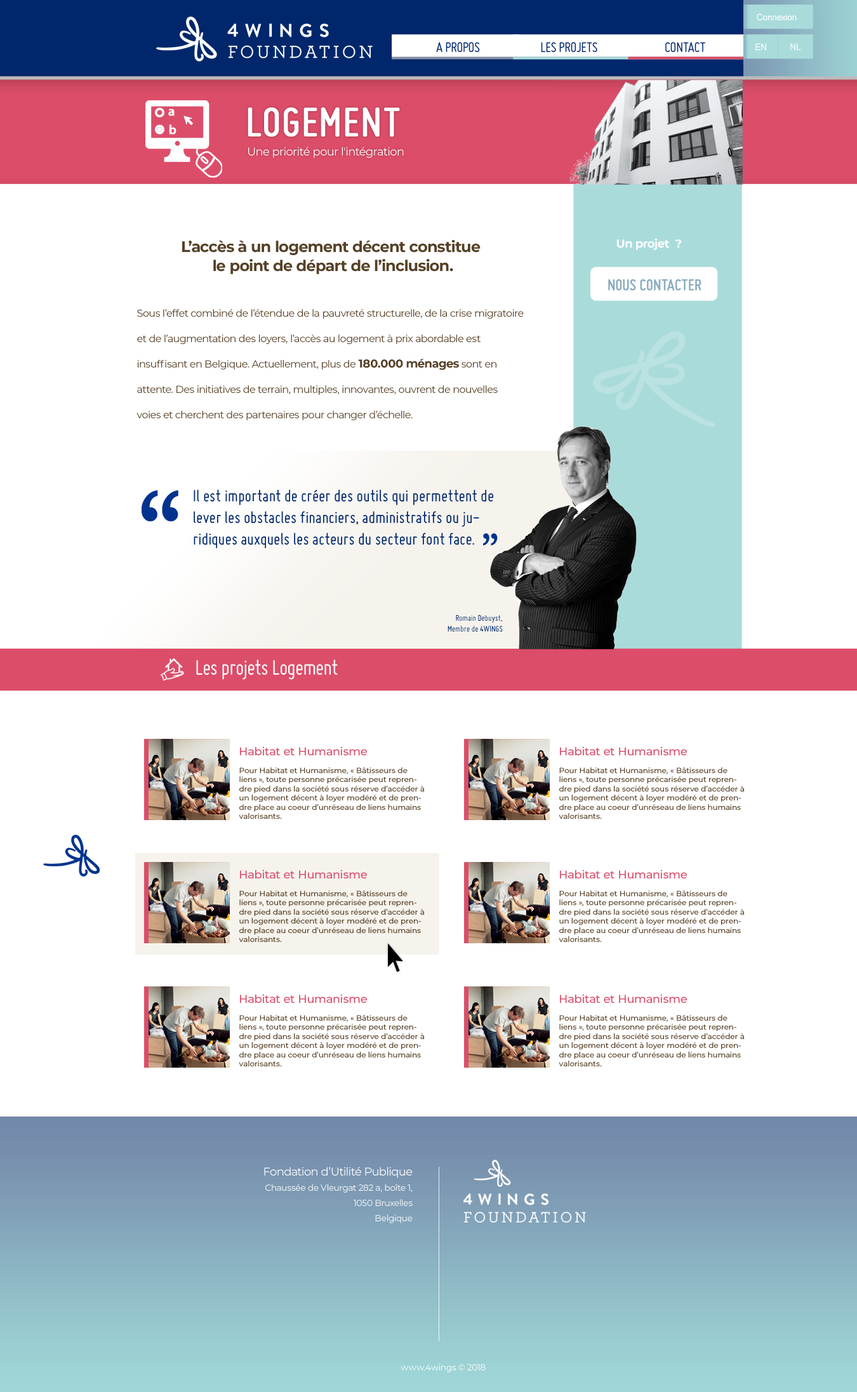
<style>
.page{position:relative;width:857px;height:1392px;background:#ffffff}
.page>*{position:absolute;margin:0}
.t1{font:8.9px "ArialMT";letter-spacing:-0.025em;color:#ffffff}
.t2{font:15.2px "Miso";letter-spacing:-0.025em;color:#00276b}
.t3{font:9px "ArialMT";letter-spacing:-0.025em;color:#ffffff}
.t4{font:44.4px "Miso";color:#ffffff;font-weight:bold}
.t5{font:11.4px "Montserrat-Regular";letter-spacing:-0.025em;color:#ffffff}
.t6{font:15.2px/19px "Montserrat-Bold";letter-spacing:-0.025em;color:#564026}
.t7{font:11.4px "Montserrat-Bold";letter-spacing:-0.025em;color:#ffffff}
.t8{font:16.9px "Miso";letter-spacing:-0.025em;color:#8bacbf;font-weight:bold}
.t9{font:10.2px/25.4px "Montserrat-Regular";letter-spacing:-0.025em;color:#564026}
.t10{font:11.4px/25.4px "Montserrat-Bold";letter-spacing:-0.025em;color:#564026}
.t11{font:87.2px "Monaco";letter-spacing:-0.025em;color:#00338d}
.t12{font:17.8px "Miso";color:#00276b}
.t13{font:33.7px "Monaco";letter-spacing:-0.025em;color:#00338d}
.t14{font:8.9px "Miso";color:#00276b}
.t15{font:22.8px "Miso";letter-spacing:-0.025em;color:#ffffff}
.t16{font:11.3px "Montserrat-Medium";color:#db4d69}
.t17{font:7.6px "Montserrat-Medium";color:#564026}
</style>
<div class="page">
<p class="t1" style="left:756px;top:13px;width:40px;height:8px">Connexion</p>
<p class="t2" style="left:436px;top:42px;width:269px;height:10px">A PROPOS                  LES PROJETS           CONTACT</p>
<p class="t3" style="left:755px;top:43px;width:11px;height:7px">EN</p>
<p class="t3" style="left:790px;top:43px;width:11px;height:7px">NL</p>
<p class="t4" style="left:248px;top:107px;width:152px;height:30px">LOGEMENT</p>
<p class="t5" style="left:248px;top:147px;width:156px;height:11px">Une priorité pour l'intégration</p>
<p class="t6" style="left:182px;top:240px;width:298px;height:34px;text-align:center">L’accès à un logement décent constitue <br>le point de départ de l’inclusion.</p>
<p class="t7" style="left:616px;top:238px;width:65px;height:12px">Un projet  ?</p>
<p class="t8" style="left:608px;top:279px;width:93px;height:12px">NOUS CONTACTER</p>
<p class="t9" style="left:136px;top:309px;width:388px;height:111px">Sous l’effet combiné de l’étendue de la pauvreté structurelle, de la crise migratoire<br>et de l’augmentation des loyers, l’accès au logement à prix abordable est<br>insuffisant en Belgique. Actuellement, plus de<span class="t10"> 180.000 ménages</span> sont en<br>attente. Des initiatives de terrain, multiples, innovantes, ouvrent de nouvelles<br>voies et cherchent des partenaires pour changer d’échelle.</p>
<p class="t11" style="left:142px;top:490px;width:36px;height:32px">“</p>
<p class="t12" style="left:194px;top:489px;width:299px;height:59px">Il est important de créer des outils qui permettent de<br>lever les obstacles financiers, administratifs ou juridiques auxquels les acteurs du secteur font face.</p>
<p class="t13" style="left:483px;top:533px;width:15px;height:13px">”</p>
<p class="t14" style="left:447px;top:614px;width:56px;height:17px;text-align:right">Romain Debuyst,<br>Membre de 4WINGS</p>
<p class="t15" style="left:196px;top:659px;width:142px;height:21px">Les projets Logement</p>
<p class="t16" style="left:240px;top:746px;width:127px;height:9px">Habitat et Humanisme</p>
<p class="t16" style="left:560px;top:746px;width:127px;height:9px">Habitat et Humanisme</p>
<p class="t17" style="left:239px;top:767px;width:185px;height:52px">Pour Habitat et Humanisme, « Bâtisseurs de liens », toute personne précarisée peut reprendre pied dans la société sous réserve d’accéder à un logement décent à loyer modéré et de prendre place au coeur d’unréseau de liens humains valorisants.</p>
<p class="t17" style="left:558px;top:767px;width:186px;height:52px">Pour Habitat et Humanisme, « Bâtisseurs de liens », toute personne précarisée peut reprendre pied dans la société sous réserve d’accéder à un logement décent à loyer modéré et de prendre place au coeur d’unréseau de liens humains valorisants.</p>
<p class="t16" style="left:240px;top:869px;width:127px;height:9px">Habitat et Humanisme</p>
<p class="t16" style="left:560px;top:869px;width:127px;height:9px">Habitat et Humanisme</p>
<p class="t17" style="left:239px;top:890px;width:185px;height:52px">Pour Habitat et Humanisme, « Bâtisseurs de liens », toute personne précarisée peut reprendre pied dans la société sous réserve d’accéder à un logement décent à loyer modéré et de prendre place au coeur d’unréseau de liens humains valorisants.</p>
<p class="t17" style="left:558px;top:890px;width:186px;height:52px">Pour Habitat et Humanisme, « Bâtisseurs de liens », toute personne précarisée peut reprendre pied dans la société sous réserve d’accéder à un logement décent à loyer modéré et de prendre place au coeur d’unréseau de liens humains valorisants.</p>
<p class="t16" style="left:240px;top:994px;width:127px;height:9px">Habitat et Humanisme</p>
<p class="t16" style="left:560px;top:994px;width:127px;height:9px">Habitat et Humanisme</p>
<p class="t17" style="left:239px;top:1015px;width:185px;height:51px">Pour Habitat et Humanisme, « Bâtisseurs de liens », toute personne précarisée peut reprendre pied dans la société sous réserve d’accéder à un logement décent à loyer modéré et de prendre place au coeur d’unréseau de liens humains valorisants.</p>
<p class="t17" style="left:558px;top:1015px;width:186px;height:51px">Pour Habitat et Humanisme, « Bâtisseurs de liens », toute personne précarisée peut reprendre pied dans la société sous réserve d’accéder à un logement décent à loyer modéré et de prendre place au coeur d’unréseau de liens humains valorisants.</p>
</div>
